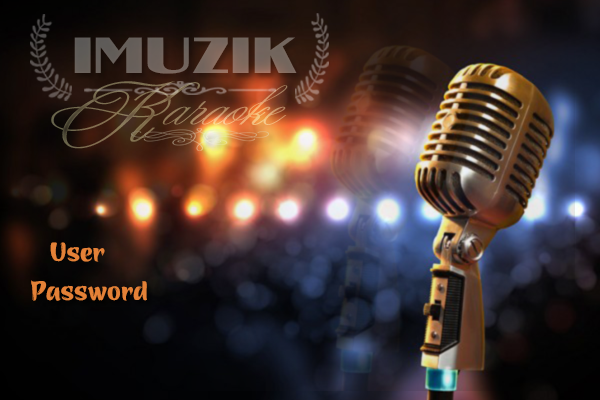
<style>
.page{position:relative;width:600px;height:400px}
.page>*{position:absolute;margin:0}
.t1{font:42.2px "UTM-Guanine";color:#70645c;scale:1.38 1}
.t2{font:64.7px "UTM-Yves-KT";color:#7c6d50;scale:1.25 1}
.t3{font:43.6px "UTM-Yves-KT";scale:1.39 1}
.t4{font:29.6px "UTM-Azuki";color:#e48137}
.t5{font:30px "UTM-Azuki";color:#e48137}
</style>
<div class="page">
<p class="t1" style="left:74px;top:37px;width:223px;height:37px">IMUZIK</p>
<p class="t2" style="left:51px;top:81px;width:149px;height:68px">K</p>
<p class="t3" style="left:162px;top:85px;width:126px;height:40px">araoke</p>
<p class="t4" style="left:50px;top:242px;width:55px;height:20px">User</p>
<p class="t5" style="left:31px;top:280px;width:116px;height:21px">Password</p>
</div>
